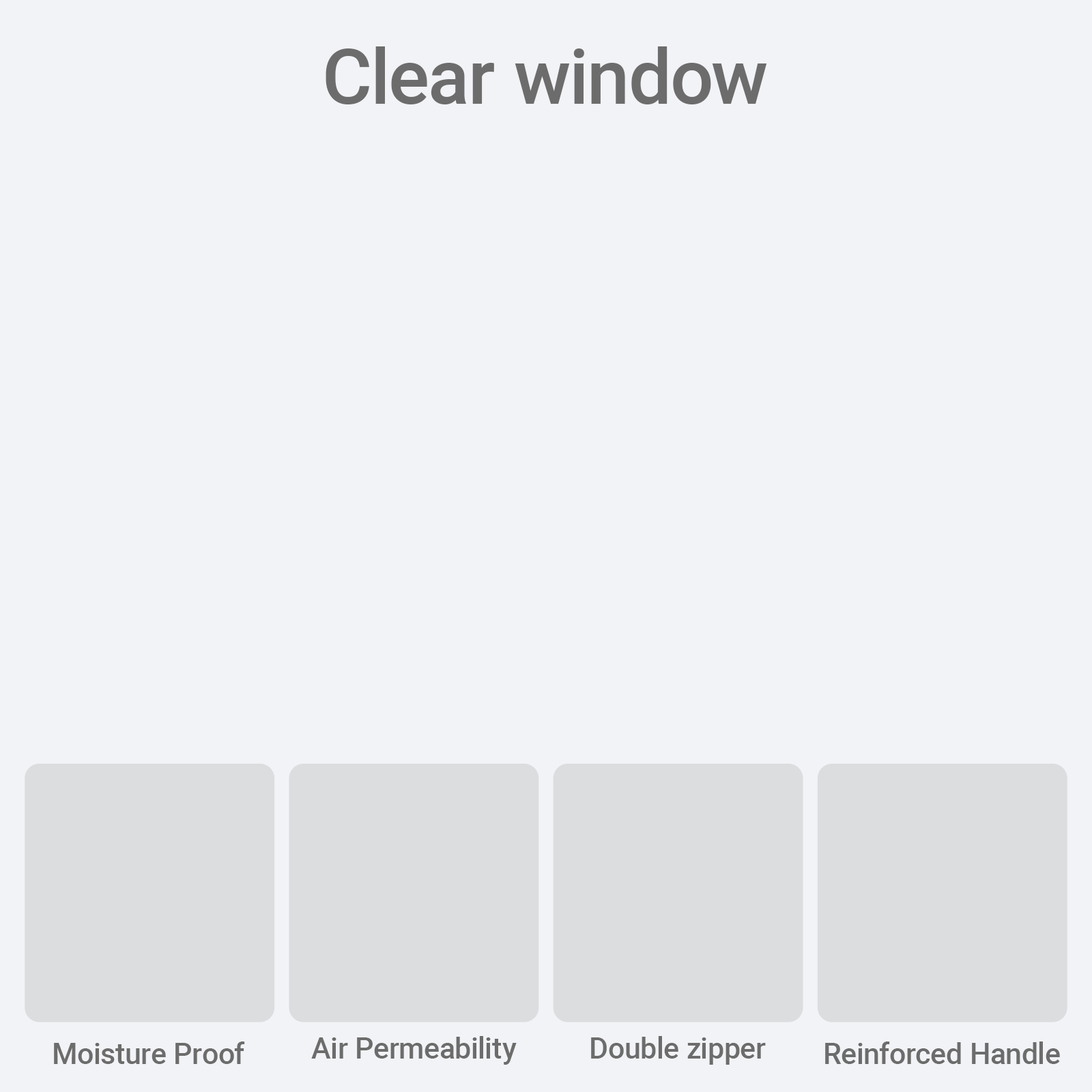
<style>
.page{position:relative;width:1092px;height:1092px;background:#f2f3f6}
.page>*{position:absolute;margin:0}
.t1{font:76.4px "Roboto-Medium";color:#6c6c6c}
.t2{font:29.1px "Roboto-Medium";color:#6c6c6c}
</style>
<div class="page">
<p class="t1" style="left:326px;top:46px;width:441px;height:58px">Clear window</p>
<p class="t2" style="left:311px;top:1036px;width:206px;height:29px">Air Permeability</p>
<p class="t2" style="left:591px;top:1036px;width:175px;height:29px">Double zipper</p>
<p class="t2" style="left:54px;top:1041px;width:191px;height:23px">Moisture Proof</p>
<p class="t2" style="left:825px;top:1041px;width:235px;height:23px">Reinforced Handle</p>
</div>
